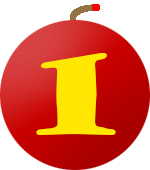
<style>
.page{position:relative;width:150px;height:170px;background:#ffffff}
.page>*{position:absolute;margin:0}
.t1{font:108.3px "GoudyStout";color:#ffe603}
</style>
<div class="page">
<p class="t1" style="left:36px;top:53px;width:80px;height:82px">1</p>
</div>
